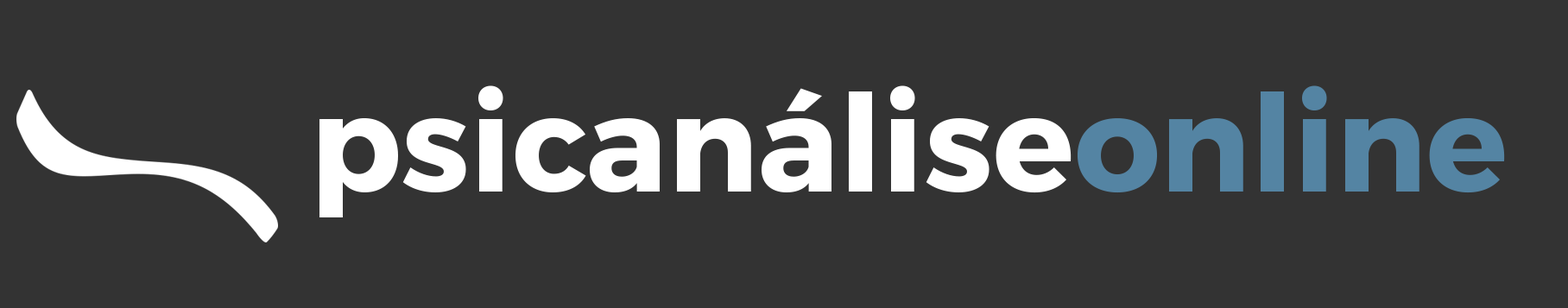
<style>
.page{position:relative;width:1568px;height:308px;background:#333333}
.page>*{position:absolute;margin:0}
.t1{font:134.7px "Montserrat-Bold";color:#ffffff}
.t2{font:134.7px "Montserrat-Bold";color:#5484a3}
</style>
<div class="page">
<p class="t1" style="left:319px;top:85px;width:1186px;height:133px">psicanálise<span class="t2">online</span></p>
</div>
